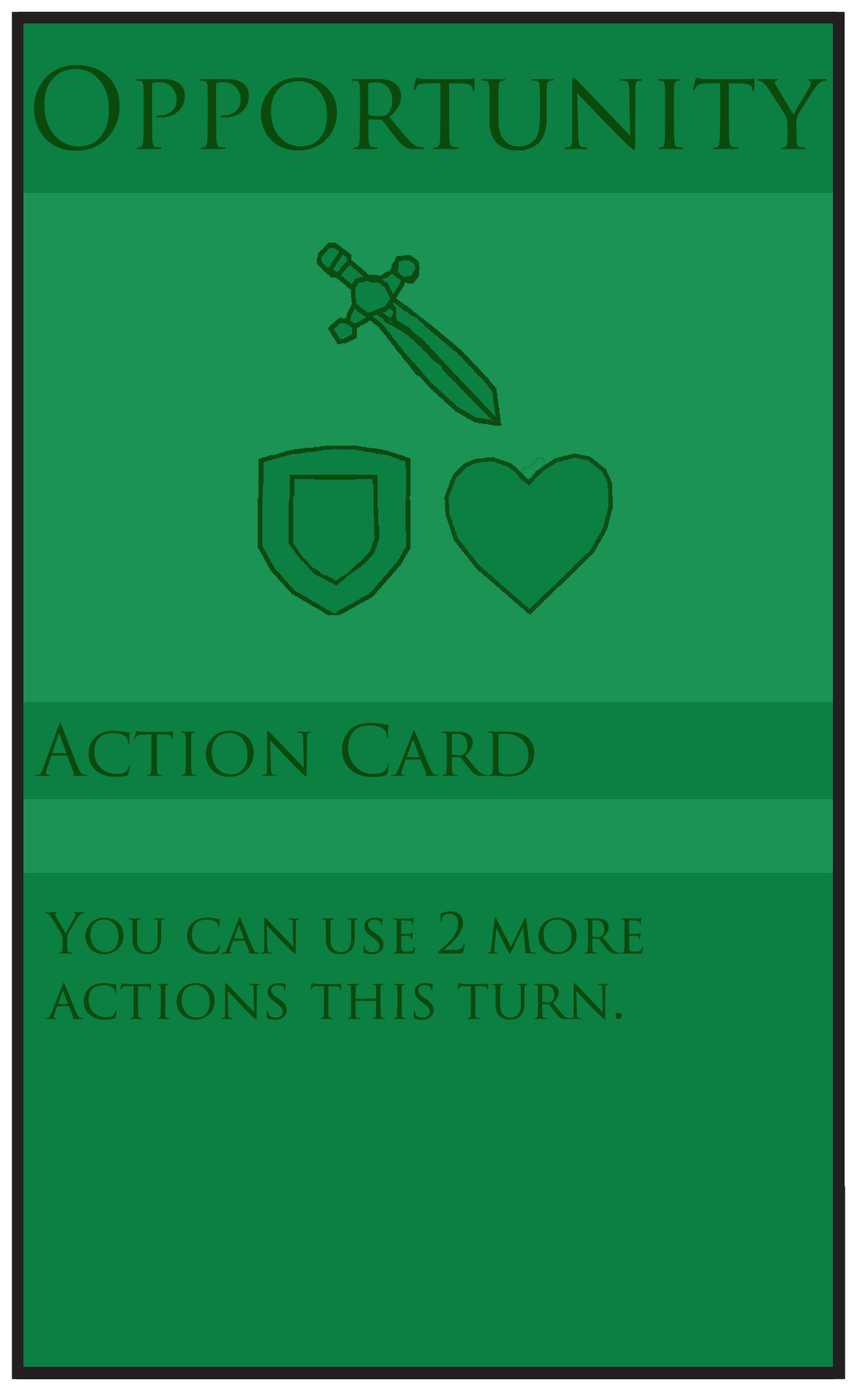
<style>
.page{position:relative;width:857px;height:1391px;background:#0c7f42}
.page>*{position:absolute;margin:0}
.t1{font:109.1px "TrajanPro-Regular";color:#0c4a0c}
.t2{font:68.9px "TrajanPro-Regular";color:#0c4a0c}
.t3{font:54.5px "TrajanPro-Regular";color:#0c4a0c}
</style>
<div class="page">
<p class="t1" style="left:34px;top:65px;width:793px;height:86px">Opportunity</p>
<p class="t2" style="left:34px;top:723px;width:501px;height:54px">Action Card</p>
<p class="t3" style="left:45px;top:912px;width:598px;height:108px">You can use 2 more <br>actions this turn.</p>
</div>
